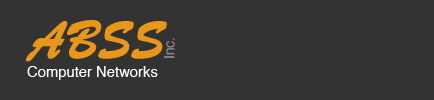
<style>
.page{position:relative;width:434px;height:100px;background:#333333}
.page>*{position:absolute;margin:0}
.t1{font:52px "BrushScriptStd";color:#e99719;font-weight:bold;scale:0.86 1}
.t2{font:14px "Helvetica";color:#888888}
.t3{font:14.8px "Helvetica";color:#ffffff}
</style>
<div class="page">
<p class="t1" style="left:26px;top:20px;width:141px;height:42px">ABSS</p>
<p class="t2" style="left:164px;top:38px;width:11px;height:20px;rotate:-90deg">Inc.</p>
<p class="t3" style="left:27px;top:66px;width:131px;height:14px">Computer Networks</p>
</div>
